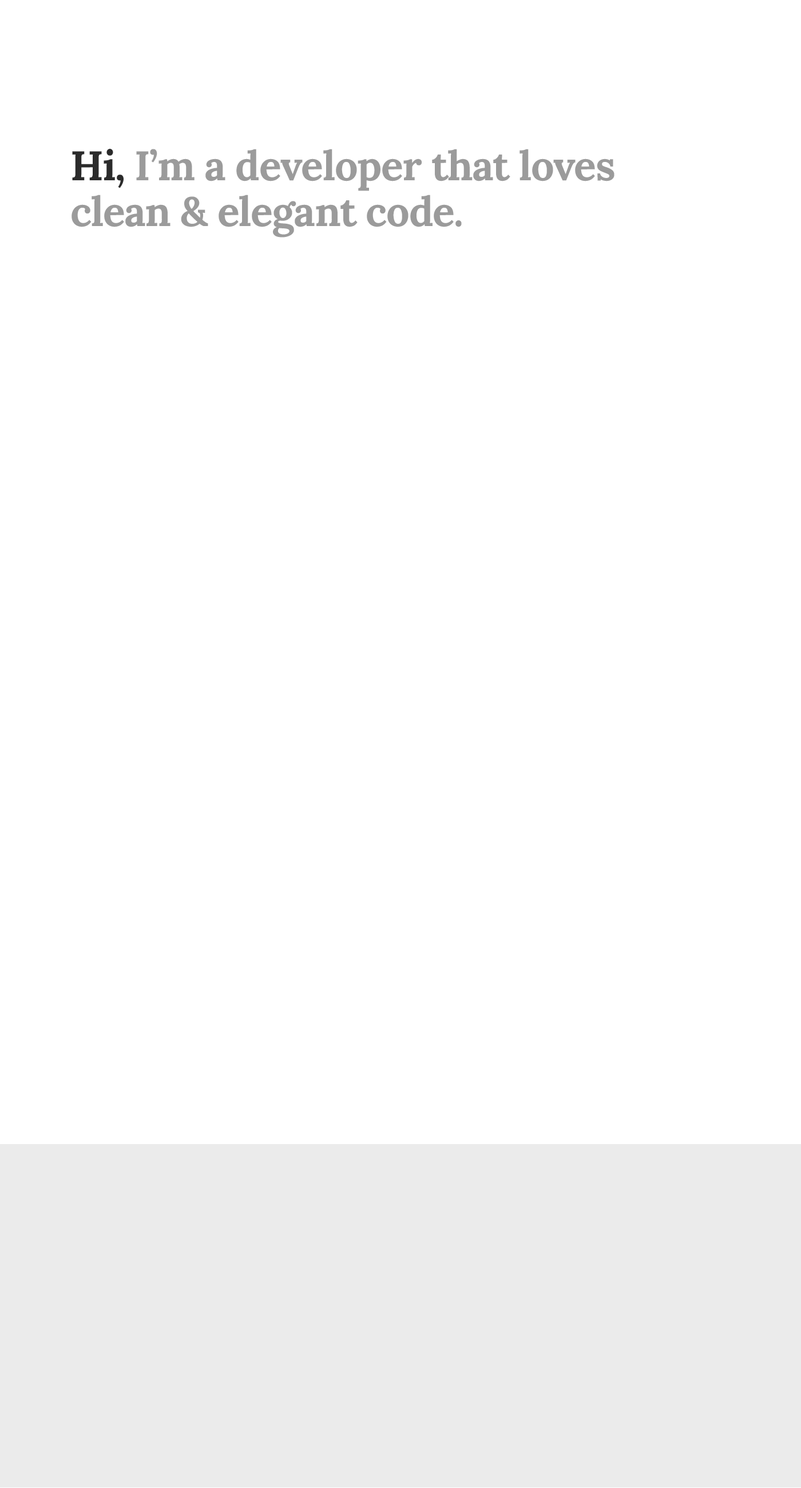
<style>
.page{position:relative;width:801px;height:1488px;background:#ffffff}
.page>*{position:absolute;margin:0}
.t1{font:41.2px/45.8px "Lora-Bold";letter-spacing:-0.02em;color:#9b9b9b}
.t2{font:41.2px/45.8px "Lora-Bold";letter-spacing:-0.02em;color:#2b2b2b}
</style>
<div class="page">
<p class="t1" style="left:72px;top:149px;width:543px;height:89px"><span class="t2">Hi,</span> I’m a developer that loves <br>clean &amp; elegant code.</p>
</div>
